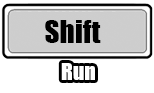
<style>
.page{position:relative;width:154px;height:93px;background:#ffffff}
.page>*{position:absolute;margin:0}
.t1{font:29.3px "Impact";color:#000000}
.t2{font:21.9px "Impact";color:#ffffff}
</style>
<div class="page">
<p class="t1" style="left:45px;top:20px;width:56px;height:23px">Shift</p>
<p class="t2" style="left:61px;top:63px;width:34px;height:17px">Run</p>
</div>
